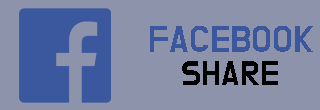
<style>
.page{position:relative;width:320px;height:110px;background:#8d93ab}
.page>*{position:absolute;margin:0}
.t1{font:30px "BMDoHyeon";color:#3b589f;text-transform:uppercase}
.t2{font:28px "BMDoHyeon";color:#000000;text-transform:uppercase}
</style>
<div class="page">
<p class="t1" style="left:150px;top:26px;width:163px;height:59px;text-align:center">facebook<br><span class="t2">share</span></p>
</div>
